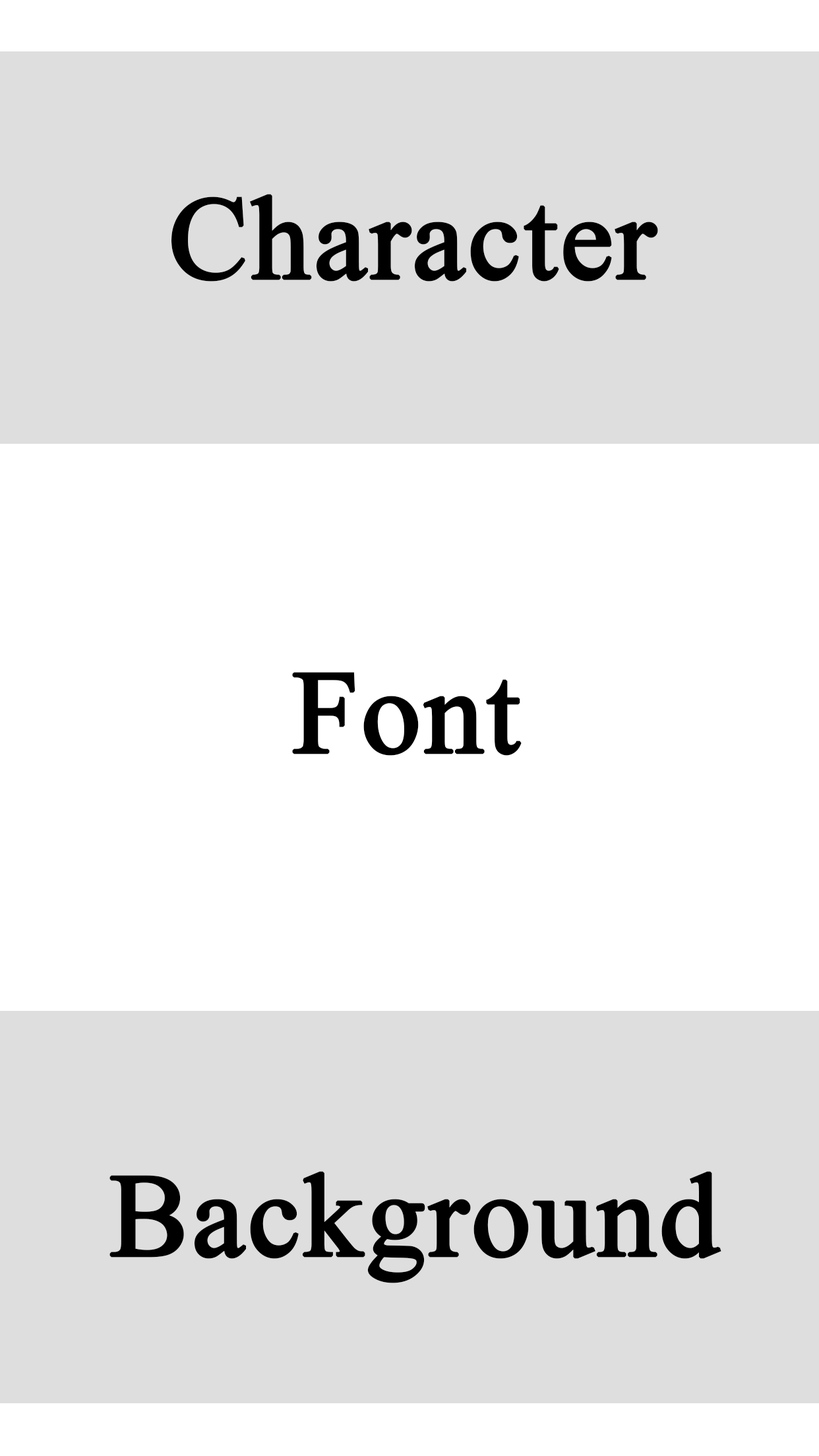
<style>
.page{position:relative;width:819px;height:1456px;background:#dedede}
.page>*{position:absolute;margin:0}
.t1{font:118.7px "TimesNewRomanPSMT";color:#000000;font-weight:bold}
</style>
<div class="page">
<p class="t1" style="left:171px;top:194px;width:487px;height:88px">Character</p>
<p class="t1" style="left:292px;top:672px;width:230px;height:84px">Font</p>
<p class="t1" style="left:109px;top:1171px;width:612px;height:112px">Background</p>
</div>
